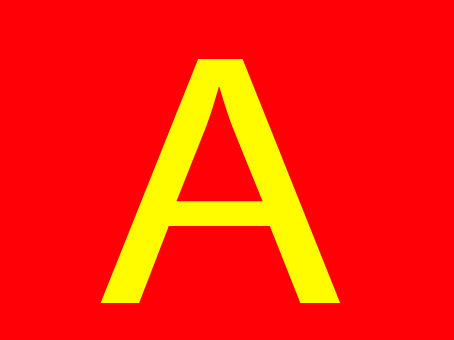
<style>
.page{position:relative;width:454px;height:340px;background:#ff0006}
.page>*{position:absolute;margin:0}
.t1{font:362.2px "MyriadPro-Regular";color:#fffc00;scale:1.17 1}
</style>
<div class="page">
<p class="t1" style="left:100px;top:59px;width:240px;height:244px">A</p>
</div>
